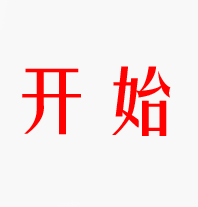
<style>
.page{position:relative;width:198px;height:207px;background:#f8f8f8}
.page>*{position:absolute;margin:0}
.t1{font:72px "FZYTK--GBK1-0";color:#ff0101;scale:1.2 1}
</style>
<div class="page">
<p class="t1" style="left:22px;top:66px;width:149px;height:70px">开始</p>
</div>
